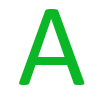
<style>
.page{position:relative;width:100px;height:100px;background:#ffffff}
.page>*{position:absolute;margin:0}
.t1{font:120px "Calibri";color:#0ab727}
</style>
<div class="page">
<p class="t1" style="left:19px;top:9px;width:66px;height:76px">A</p>
</div>
